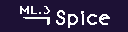
<style>
.page{position:relative;width:128px;height:32px;background:#1d1135}
.page>*{position:absolute;margin:0}
.t1{font:10px "BonvenoCF-Light";letter-spacing:0.005em;color:#ffffff;font-weight:bold}
.t2{font:18px "BonvenoCF-Light";letter-spacing:0.005em;color:#ffffff;font-weight:bold}
</style>
<div class="page">
<p class="t1" style="left:20px;top:6px;width:17px;height:8px">ML</p>
<p class="t1" style="left:44px;top:6px;width:6px;height:8px">3</p>
<p class="t2" style="left:56px;top:10px;width:54px;height:18px">Spice</p>
</div>
